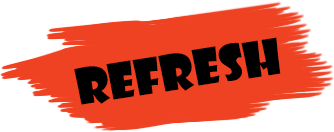
<style>
.page{position:relative;width:334px;height:132px;background:#ef4223}
.page>*{position:absolute;margin:0}
.t1{font:48px "ShowcardGothic-Reg";color:#000000}
</style>
<div class="page">
<p class="t1" style="left:74px;top:37px;width:207px;height:68px;rotate:-9deg">refresh</p>
</div>
